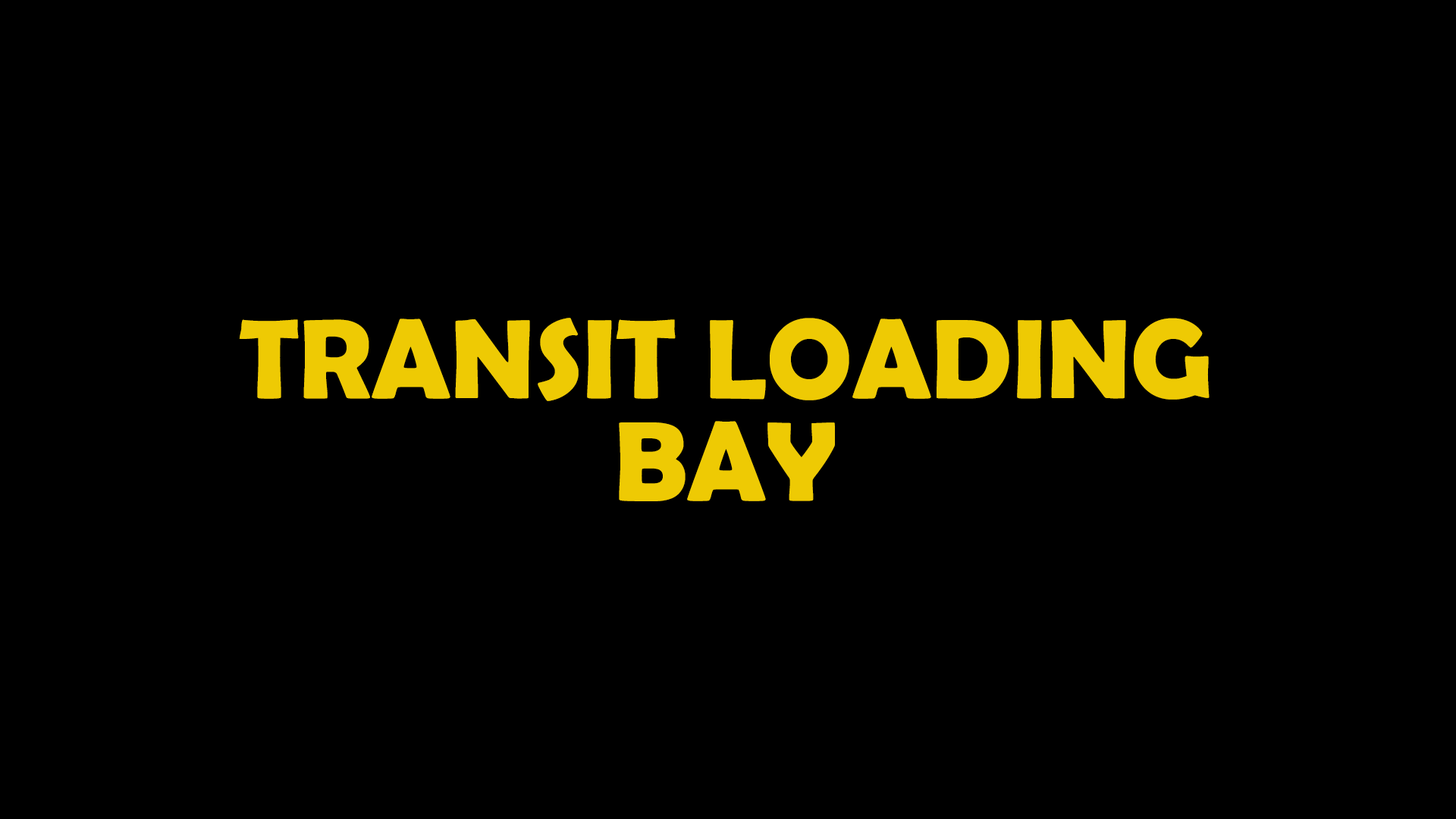
<style>
.page{position:relative;width:1456px;height:819px;background:#000000}
.page>*{position:absolute;margin:0}
.t1{font:113.7px/102.4px "BerlinSansFBDemi-Bold";color:#eeca04}
</style>
<div class="page">
<p class="t1" style="left:239px;top:318px;width:971px;height:183px;text-align:center">TRANSIT LOADING<br>BAY</p>
</div>
